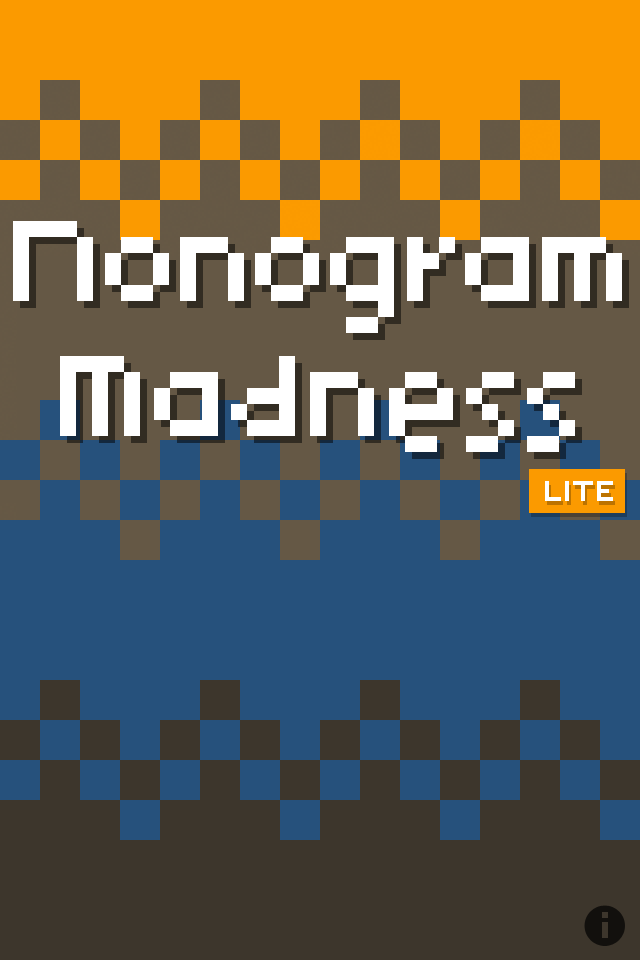
<style>
.page{position:relative;width:640px;height:960px;background:#26517c}
.page>*{position:absolute;margin:0}
.t1{font:112px "7px4bus";color:#ffffff}
</style>
<div class="page">
<p class="t1" style="left:13px;top:221px;width:609px;height:231px;text-align:center">Nonogram<br>Madness</p>
</div>
